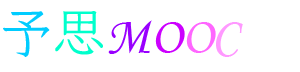
<style>
.page{position:relative;width:300px;height:72px;background:#ffffff}
.page>*{position:absolute;margin:0}
.t1{font:52px "TsangerJinKai01-27533-W03";color:#00ccff}
.t2{font:52px "TsangerJinKai01-27533-W03";color:#00ffcc}
.t3{font:52px "STLiti";color:#9900ff}
.t4{font:52px "STLiti";color:#cc00ff}
.t5{font:52px "STLiti";color:#ff66ff}
.t6{font:52px "STLiti";color:#ff99ff}
</style>
<div class="page">
<p class="t1" style="left:3px;top:11px;width:240px;height:46px">予<span class="t2">思</span><span class="t3">M</span><span class="t4">O</span><span class="t5">O</span><span class="t6">C</span></p>
</div>
